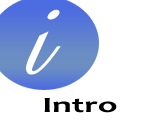
<style>
.page{position:relative;width:160px;height:120px;background:#ffffff}
.page>*{position:absolute;margin:0}
.t1{font:22px "Candara-Bold";color:#000000;scale:1.6 1}
</style>
<div class="page">
<p class="t1" style="left:44px;top:98px;width:73px;height:15px">Intro</p>
</div>
